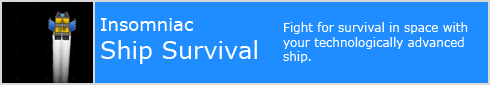
<style>
.page{position:relative;width:490px;height:85px;background:#1f8cff}
.page>*{position:absolute;margin:0}
.t1{font:24px "Verdana";color:#ffffff}
.t2{font:18px "Verdana";color:#ffffff}
.t3{font:12px "Verdana";color:#ffffff}
</style>
<div class="page">
<p class="t1" style="left:101px;top:18px;width:156px;height:46px"><span class="t2">Insomniac<br></span>Ship Survival</p>
<p class="t3" style="left:283px;top:22px;width:185px;height:41px">Fight for survival in space with your technologically advanced ship.</p>
</div>
